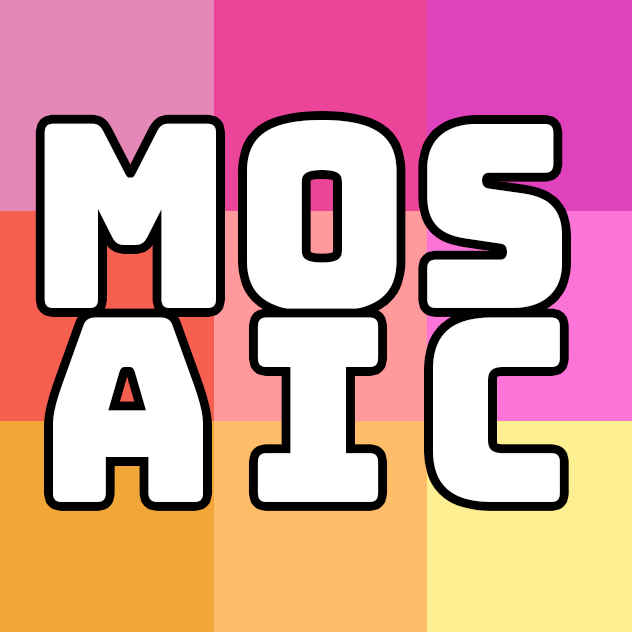
<style>
.page{position:relative;width:632px;height:632px;background:#ffffff}
.page>*{position:absolute;margin:0}
.t1{font:255.9px "Bungee-Regular";letter-spacing:0.02em;color:#ffffff;text-transform:uppercase;scale:0.94 1}
.t2{font:255.9px "Bungee-Regular";color:#ffffff;text-transform:uppercase;scale:0.94 1}
.t3{font:255.9px "Bungee-Regular";letter-spacing:0.12em;color:#ffffff;text-transform:uppercase;scale:0.94 1}
</style>
<div class="page">
<p class="t1" style="left:44px;top:120px;width:518px;height:192px"><span class="t2">M</span>OS</p>
<p class="t3" style="left:53px;top:317px;width:507px;height:185px">AIC</p>
</div>
